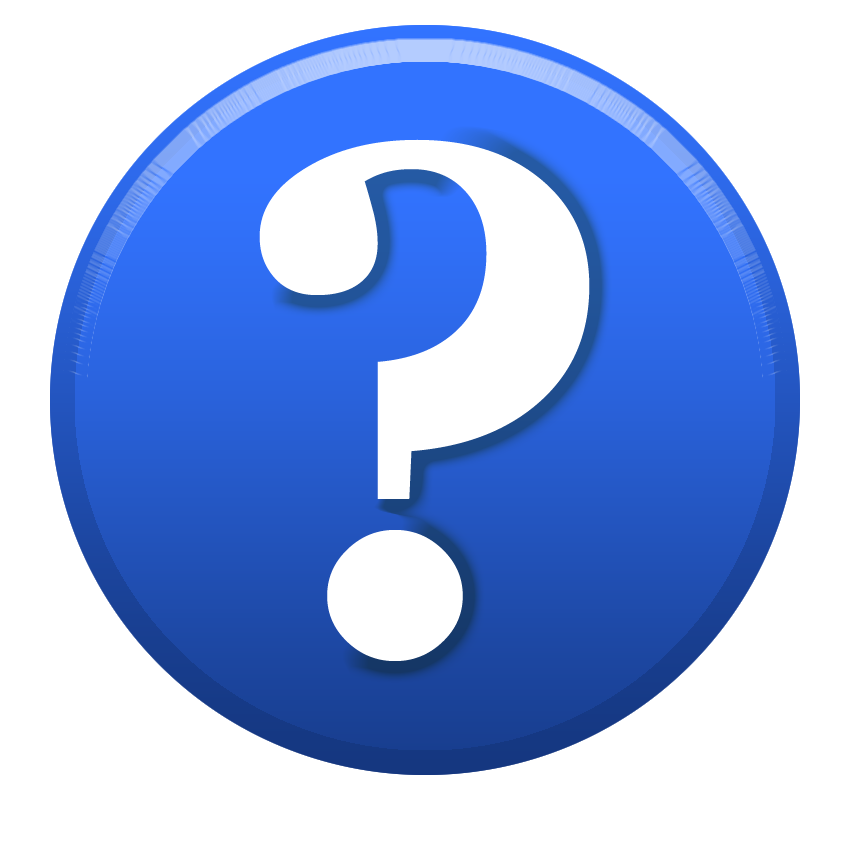
<style>
.page{position:relative;width:850px;height:850px;background:#ffffff}
.page>*{position:absolute;margin:0}
.t1{font:720px "Georgia-Bold";color:#ffffff}
</style>
<div class="page">
<p class="t1" style="left:259px;top:139px;width:331px;height:522px">?</p>
</div>
